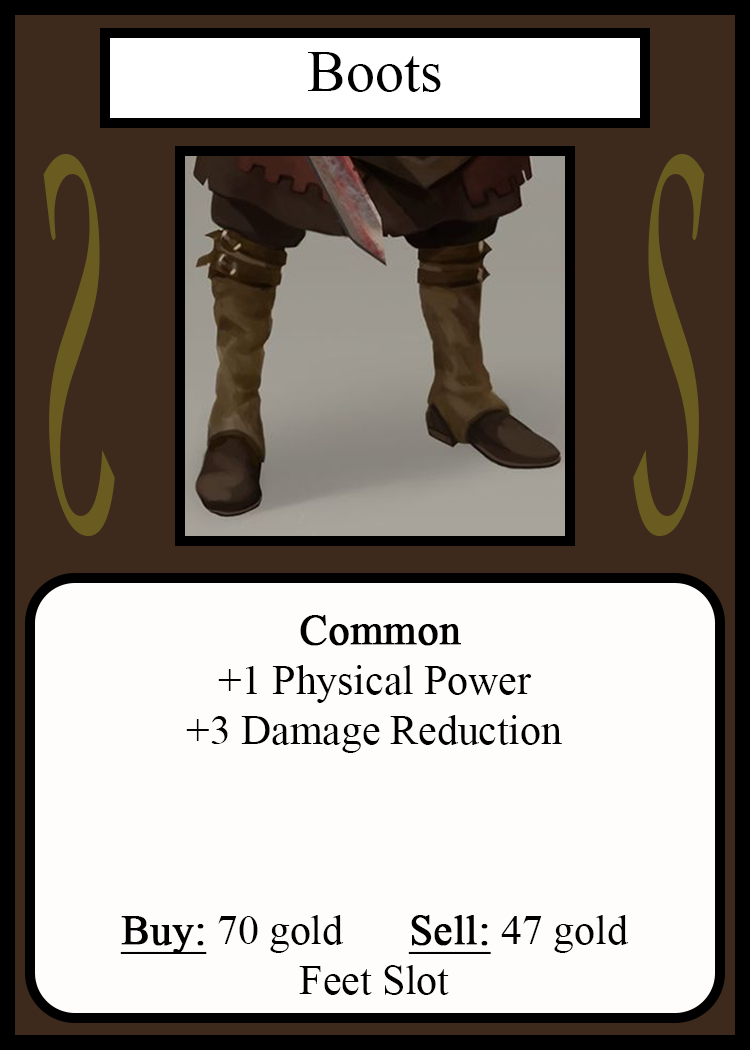
<style>
.page{position:relative;width:750px;height:1050px;background:#fffcfc}
.page>*{position:absolute;margin:0}
.t1{font:58.3px "TimesNewRomanPSMT";color:#010101}
.t2{font:548.5px "Apple-Chancery";color:#6a5c21;scale:0.27 1}
.t3{font:548.2px "Apple-Chancery";color:#6a5c21;scale:0.27 1}
.t4{font:41.7px "TimesNewRomanPSMT";color:#000000}
.t5{font:41.7px "TimesNewRomanPSMT";color:#000000;font-weight:bold}
.t6{font:41.7px "TimesNewRomanPSMT";color:#000000;font-weight:bold;text-decoration:underline}
</style>
<div class="page">
<p class="t1" style="left:308px;top:52px;width:133px;height:40px">Boots</p>
<p class="t2" style="left:43px;top:154px;width:72px;height:382px;rotate:180deg">S</p>
<p class="t3" style="left:633px;top:154px;width:72px;height:382px">S</p>
<p class="t4" style="left:120px;top:615px;width:509px;height:380px;text-align:center"><span class="t5"> Common<br></span>+1 Physical Power<br>+3 Damage Reduction<br><br><br><br><span class="t6">Buy:</span> 70 gold   <span class="t6">Sell:</span> 47 gold<br>Feet Slot</p>
</div>
